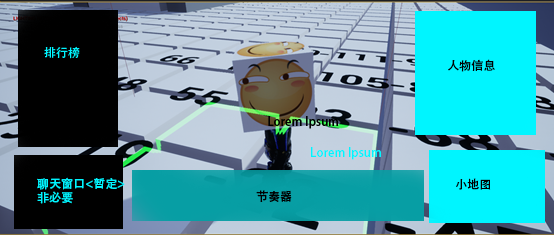
<style>
.page{position:relative;width:554px;height:235px}
.page>*{position:absolute;margin:0}
.t1{font:12px "AdobeHeitiStd-Regular";color:#000000}
.t2{font:12px "AdobeHeitiStd-Regular";color:#00f5ff}
</style>
<div class="page">
<p class="t1" style="left:448px;top:59px;width:47px;height:13px">人物信息</p>
<p class="t2" style="left:311px;top:147px;width:70px;height:13px">Lorem Ipsum</p>
<p class="t2" style="left:37px;top:177px;width:88px;height:27px">聊天窗口&lt;暂定&gt;<br>非必要</p>
<p class="t1" style="left:456px;top:178px;width:35px;height:12px">小地图</p>
</div>
